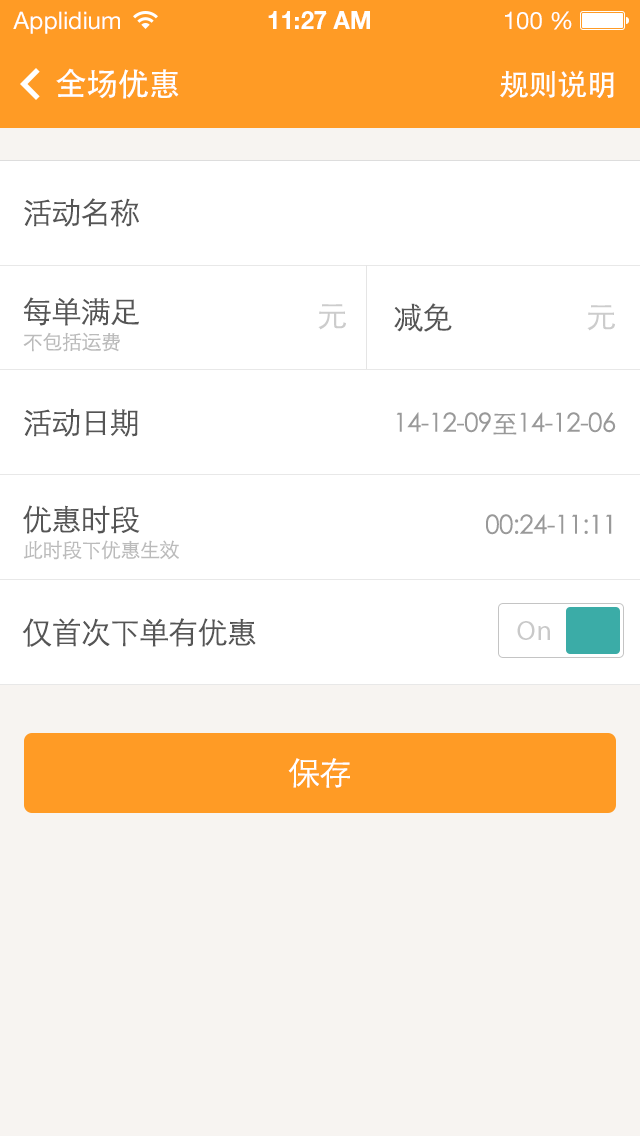
<style>
.page{position:relative;width:640px;height:1136px;background:#ffffff}
.page>*{position:absolute;margin:0}
.t1{font:32px "STHeiti";letter-spacing:-0.025em;color:#ffffff}
.t2{font:30px "STHeiti";letter-spacing:-0.025em;color:#ffffff}
.t3{font:30px "STXihei";letter-spacing:-0.025em;color:#555555}
.t4{font:30px "STXihei";letter-spacing:-0.025em;color:#cccccc}
.t5{font:20px "STXihei";letter-spacing:-0.025em;color:#bbbbbb}
.t6{font:26px "STXihei";letter-spacing:-0.025em;color:#999999}
.t7{font:27.7px "MyriadPro-Regular";letter-spacing:0.05em;color:#c9c9c9}
.t8{font:32px "STXihei";letter-spacing:-0.025em;color:#ffffff}
</style>
<div class="page">
<p class="t1" style="left:56px;top:68px;width:123px;height:31px">全场优惠</p>
<p class="t2" style="left:500px;top:70px;width:114px;height:28px">规则说明</p>
<p class="t3" style="left:24px;top:198px;width:115px;height:29px">活动名称</p>
<p class="t3" style="left:23px;top:297px;width:116px;height:29px">每单满足</p>
<p class="t4" style="left:318px;top:304px;width:28px;height:26px">元</p>
<p class="t3" style="left:394px;top:303px;width:58px;height:29px">减免</p>
<p class="t4" style="left:587px;top:305px;width:28px;height:26px">元</p>
<p class="t5" style="left:23px;top:332px;width:97px;height:20px">不包括运费</p>
<p class="t3" style="left:24px;top:408px;width:114px;height:29px">活动日期</p>
<p class="t6" style="left:396px;top:412px;width:220px;height:23px">14-12-09至14-12-06</p>
<p class="t3" style="left:23px;top:505px;width:117px;height:29px">优惠时段</p>
<p class="t6" style="left:486px;top:514px;width:126px;height:21px">00:24-11:11</p>
<p class="t5" style="left:23px;top:540px;width:156px;height:20px">此时段下优惠生效</p>
<p class="t3" style="left:22px;top:618px;width:234px;height:29px">仅首次下单有优惠</p>
<p class="t7" style="left:517px;top:621px;width:33px;height:19px">On</p>
<p class="t8" style="left:288px;top:758px;width:62px;height:30px">保存</p>
</div>
